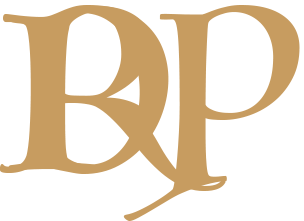
<style>
.page{position:relative;width:304px;height:221px;background:#ffffff}
.page>*{position:absolute;margin:0}
.t1{font:216.7px "Luminari-Regular";color:#c79c60}
</style>
<div class="page">
<p class="t1" style="left:0px;top:5px;width:169px;height:169px">D</p>
<p class="t1" style="left:8px;top:6px;width:218px;height:185px">R</p>
<p class="t1" style="left:123px;top:5px;width:177px;height:216px">P</p>
</div>
